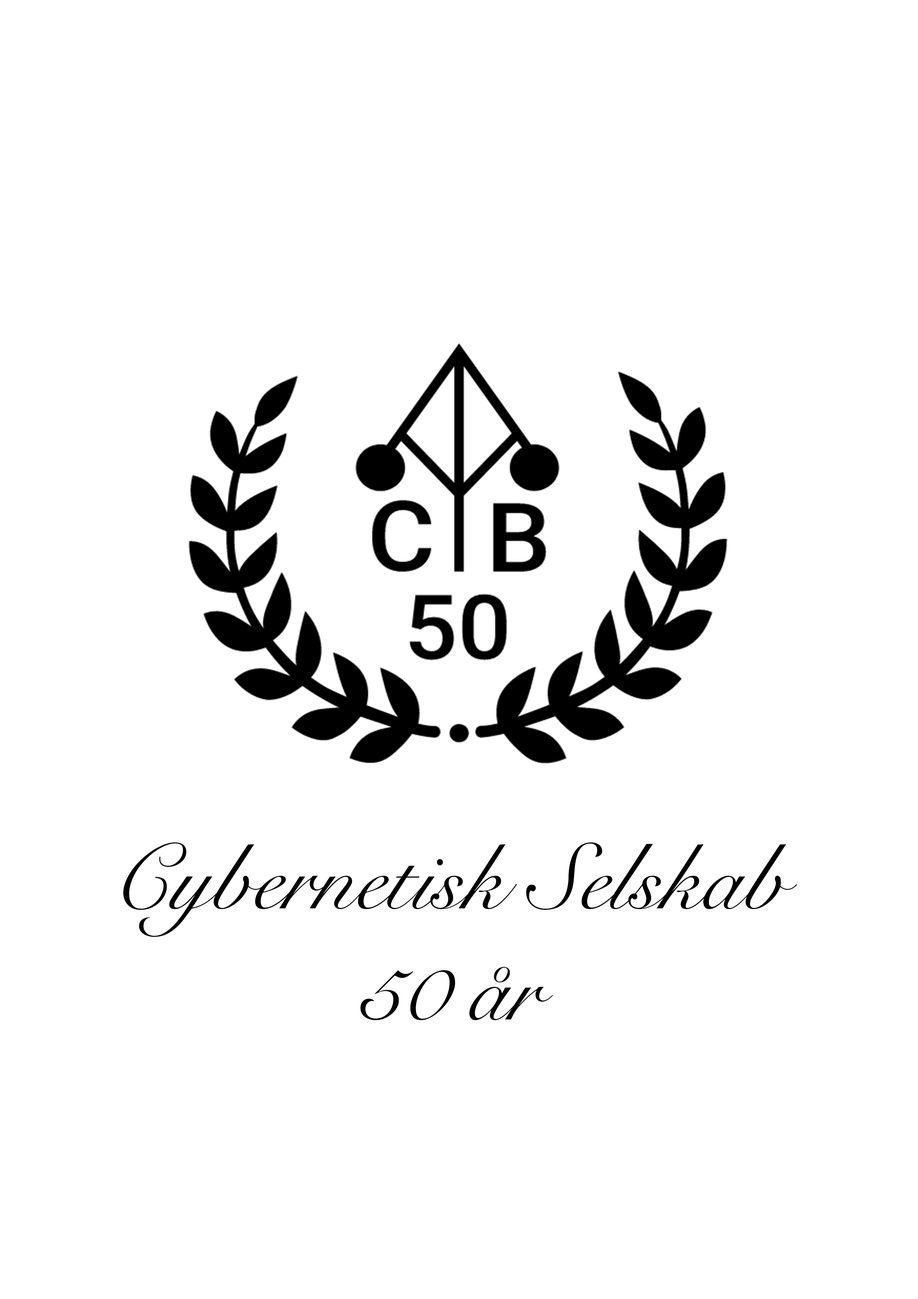
<style>
.page{position:relative;width:918px;height:1299px;background:#ffffff}
.page>*{position:absolute;margin:0}
.t1{font:92.6px "SnellRoundhand";color:#000000}
</style>
<div class="page">
<p class="t1" style="left:123px;top:842px;width:674px;height:178px;text-align:center">Cybernetisk Selskab<br>50 år</p>
</div>
